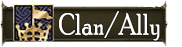
<style>
.page{position:relative;width:182px;height:47px;background:#ffffff}
.page>*{position:absolute;margin:0}
.t1{font:30px "PoorRichard-Regular";color:#ffffff;scale:0.82 1}
</style>
<div class="page">
<p class="t1" style="left:59px;top:11px;width:101px;height:30px">Clan/Ally</p>
</div>
